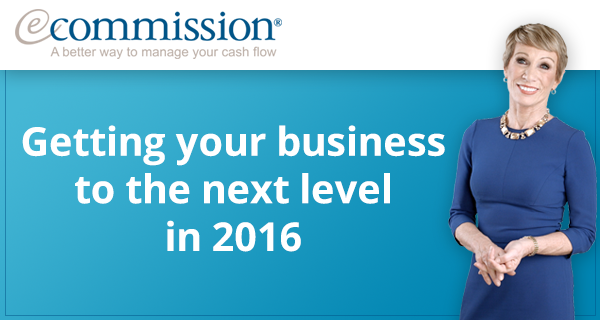
<style>
.page{position:relative;width:600px;height:320px;background:#ffffff}
.page>*{position:absolute;margin:0}
.t1{font:39.6px "OpenSans-Bold";color:#ffffff}
</style>
<div class="page">
<p class="t1" style="left:22px;top:125px;width:423px;height:127px;text-align:center">Getting your business<br>to the next level<br>in 2016</p>
</div>
